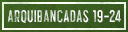
<style>
.page{position:relative;width:128px;height:32px}
.page>*{position:absolute;margin:0}
.t1{font:16px "HillstownCondensedClean";letter-spacing:0.05em;text-transform:uppercase}
</style>
<div class="page">
<p class="t1" style="left:8px;top:10px;width:113px;height:13px">Arquibancadas 19-24</p>
</div>
